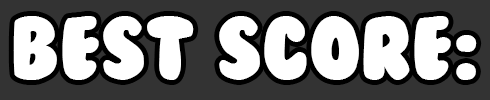
<style>
.page{position:relative;width:490px;height:100px;background:#333333}
.page>*{position:absolute;margin:0}
.t1{font:82px "BubbleGum";color:#ffffff}
</style>
<div class="page">
<p class="t1" style="left:13px;top:16px;width:464px;height:64px">Best Score:</p>
</div>
